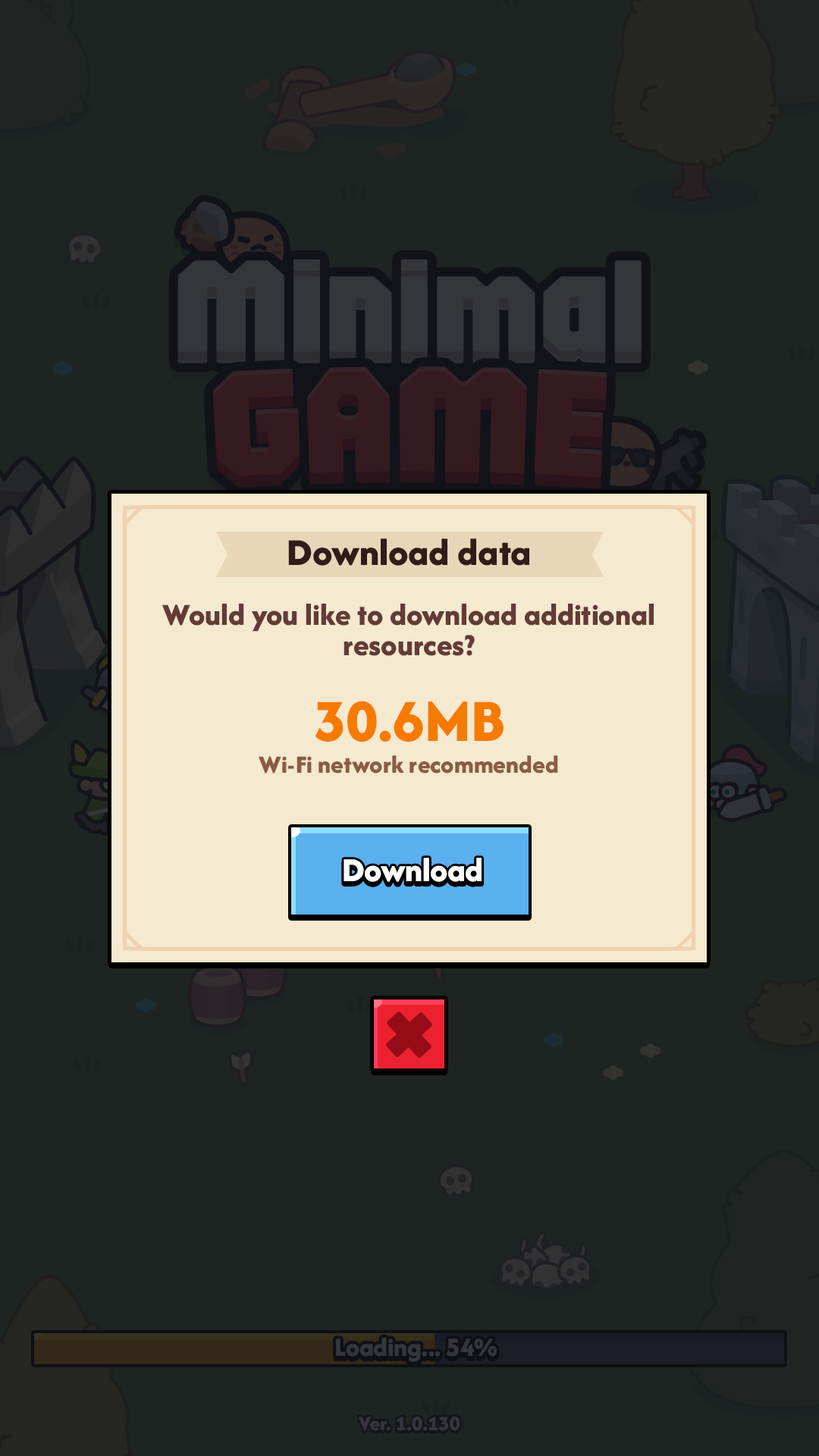
<style>
.page{position:relative;width:819px;height:1456px;background:#1e2422}
.page>*{position:absolute;margin:0}
.t1{font:39.4px "AfacadFlux-ExtraBold";color:#341b19}
.t2{font:31.8px/30.3px "AfacadFlux-ExtraBold";color:#633b37}
.t3{font:62.2px "AfacadFlux-ExtraBold";color:#f67a00}
.t4{font:25.8px "AfacadFlux-ExtraBold";color:#8b5c45}
.t5{font:34.9px "AfacadFlux-ExtraBold";color:#ffffff}
</style>
<div class="page">
<p class="t1" style="left:288px;top:538px;width:241px;height:28px">Download data</p>
<p class="t2" style="left:162px;top:604px;width:492px;height:52px;text-align:center">Would you like to download additional<br>resources?</p>
<p class="t3" style="left:315px;top:701px;width:189px;height:41px">30.6MB</p>
<p class="t4" style="left:259px;top:755px;width:299px;height:18px">Wi-Fi network recommended</p>
<p class="t5" style="left:344px;top:858px;width:138px;height:24px">Download</p>
</div>
